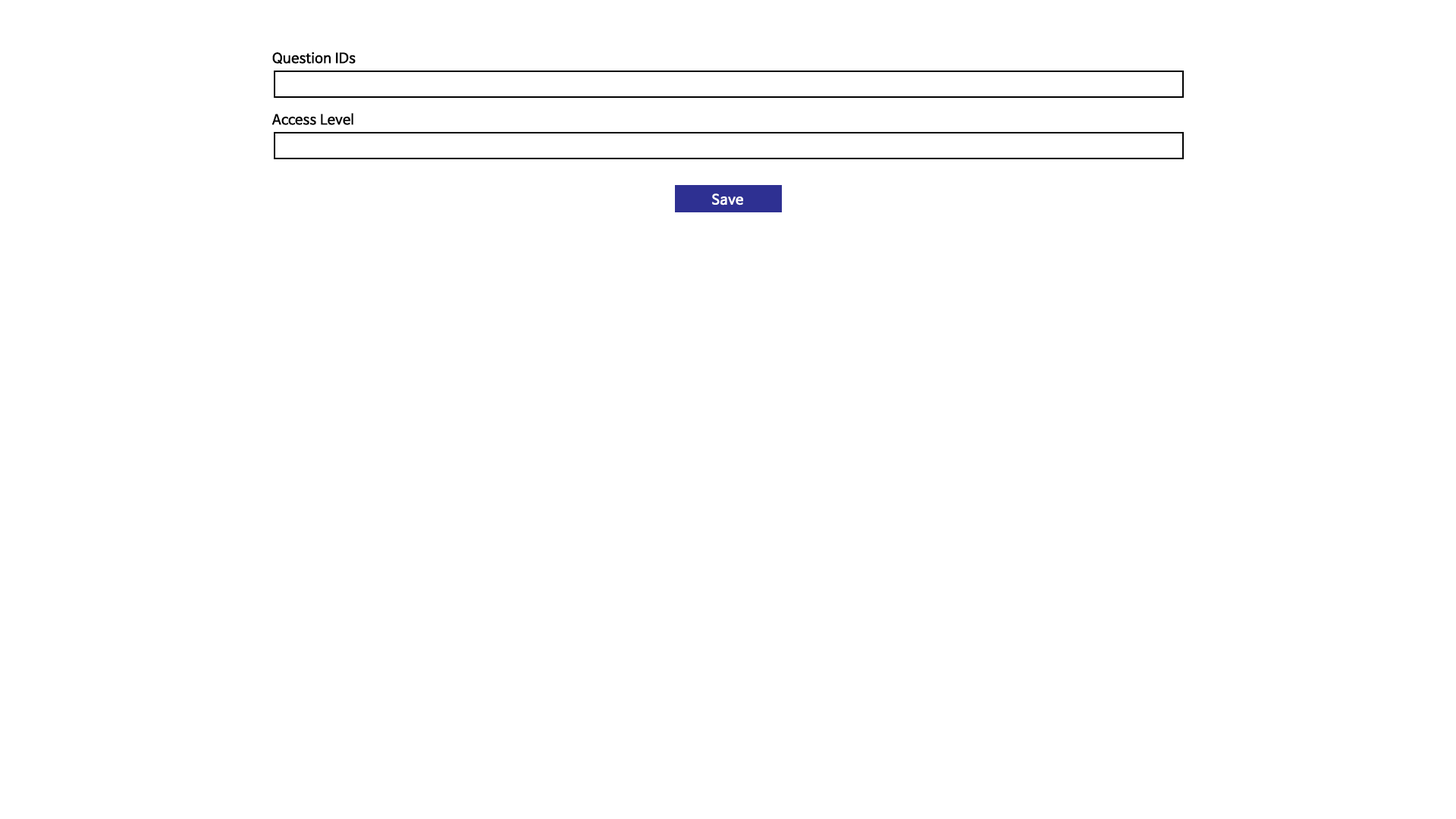
<style>
.page{position:relative;width:1456px;height:819px;background:#ffffff}
.page>*{position:absolute;margin:0}
.t1{font:13.6px "NanumBarunGothic";color:#000000;font-weight:bold}
.t2{font:13.6px "NanumBarunGothic";color:#ffffff;font-weight:bold}
</style>
<div class="page">
<p class="t1" style="left:272px;top:52px;width:84px;height:12px">Question IDs</p>
<p class="t1" style="left:271px;top:113px;width:82px;height:12px">Access Level</p>
<p class="t2" style="left:712px;top:193px;width:31px;height:13px">Save</p>
</div>
